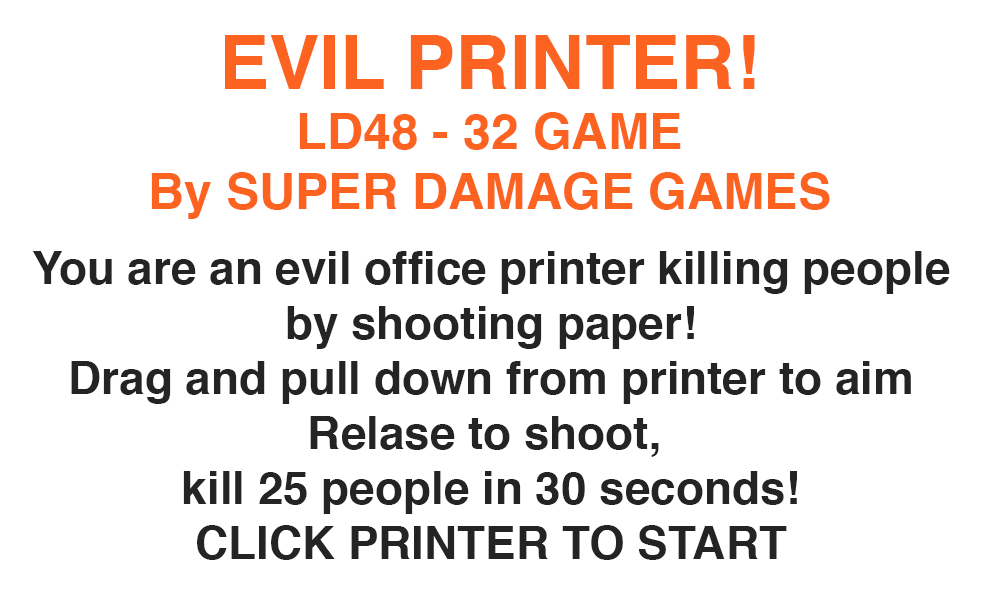
<style>
.page{position:relative;width:1000px;height:613px;background:#ffffff}
.page>*{position:absolute;margin:0}
.t1{font:12px "Helvetica-Bold";color:#fc6321}
.t2{font:75px "Helvetica-Bold";color:#fc6321}
.t3{font:45.8px "Helvetica-Bold";color:#242424}
</style>
<div class="page">
<p class="t1" style="left:151px;top:35px;width:679px;height:184px;text-align:center"><span class="t2">EVIL PRINTER!<br></span>LD48 - 32 GAME<br>By SUPER DAMAGE GAMES</p>
<p class="t3" style="left:32px;top:251px;width:918px;height:309px;text-align:center">You are an evil office printer killing people<br>by shooting paper!<br>Drag and pull down from printer to aim<br>Relase to shoot, <br>kill 25 people in 30 seconds!<br>CLICK PRINTER TO START</p>
</div>
